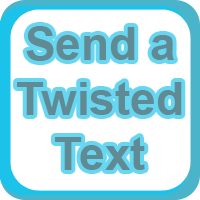
<style>
.page{position:relative;width:200px;height:200px;background:#ffffff}
.page>*{position:absolute;margin:0}
.t1{font:46px "Arial-BoldMT";color:#608a94}
</style>
<div class="page">
<p class="t1" style="left:17px;top:26px;width:165px;height:144px;text-align:center">Send a Twisted Text</p>
</div>
